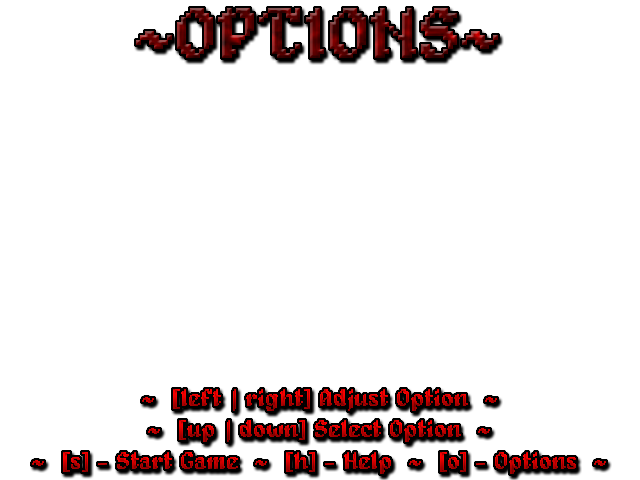
<style>
.page{position:relative;width:640px;height:480px;background:#ffffff}
.page>*{position:absolute;margin:0}
.t1{font:72px "Alagard";text-transform:uppercase}
.t2{font:24px "Alagard"}
</style>
<div class="page">
<p class="t1" style="left:136px;top:8px;width:362px;height:50px">~OPTIONS~</p>
<p class="t2" style="left:142px;top:389px;width:355px;height:22px">~  [left | right] Adjust Option  ~</p>
<p class="t2" style="left:148px;top:420px;width:342px;height:22px">~  [up | down] Select Option  ~</p>
<p class="t2" style="left:32px;top:452px;width:574px;height:22px">~  [s] - Start Game  ~  [h] - Help  ~  [o] - Options  ~</p>
</div>
